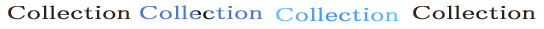
<style>
.page{position:relative;width:544px;height:29px;background:#ffffff}
.page>*{position:absolute;margin:0}
.t1{font:19px "MS-PMincho";color:#2d2019;font-weight:bold;scale:1.46 1}
.t2{font:19px "MS-PMincho";color:#4978d8;font-weight:bold;scale:1.46 1}
.t3{font:19px "MS-PMincho";font-weight:bold;scale:1.46 1}
</style>
<div class="page">
<p class="t1" style="left:8px;top:5px;width:123px;height:15px">Collection</p>
<p class="t2" style="left:140px;top:5px;width:123px;height:15px">Collection</p>
<p class="t1" style="left:413px;top:5px;width:123px;height:15px">Collection</p>
<p class="t3" style="left:276px;top:7px;width:123px;height:15px">Collection</p>
</div>
